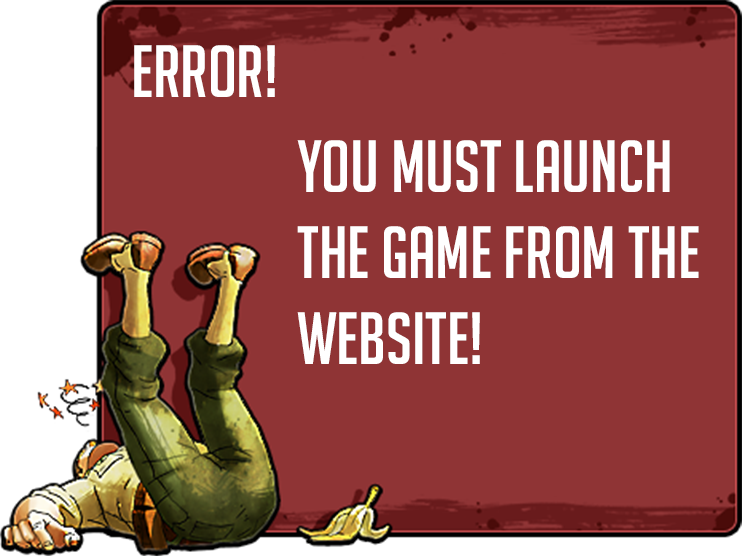
<style>
.page{position:relative;width:742px;height:556px;background:#8f3435}
.page>*{position:absolute;margin:0}
.t1{font:72px "BigNoodleTitling";color:#ffffff}
</style>
<div class="page">
<p class="t1" style="left:134px;top:45px;width:141px;height:52px">Error!</p>
<p class="t1" style="left:297px;top:140px;width:402px;height:224px">you must launch the game from the website!</p>
</div>
